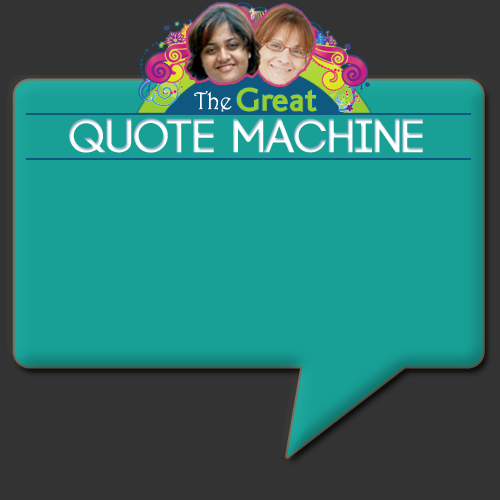
<style>
.page{position:relative;width:500px;height:500px;background:#18a096}
.page>*{position:absolute;margin:0}
.t1{font:48px "Code-Bold";color:#ffffff;text-transform:uppercase}
</style>
<div class="page">
<p class="t1" style="left:69px;top:118px;width:354px;height:35px">Quote Machine</p>
</div>
